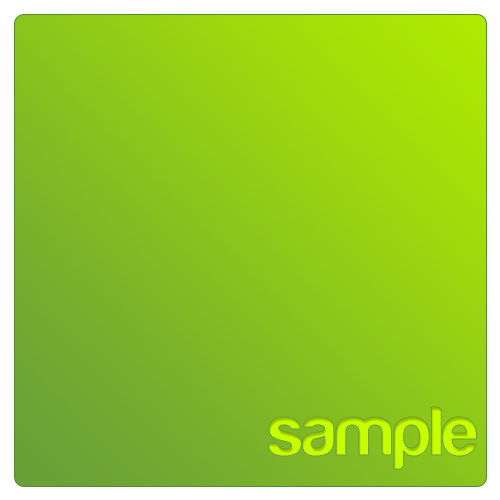
<style>
.page{position:relative;width:500px;height:500px}
.page>*{position:absolute;margin:0}
.t1{font:72px "Harabara";color:#c6ff00}
</style>
<div class="page">
<p class="t1" style="left:268px;top:407px;width:209px;height:62px">sample</p>
</div>
